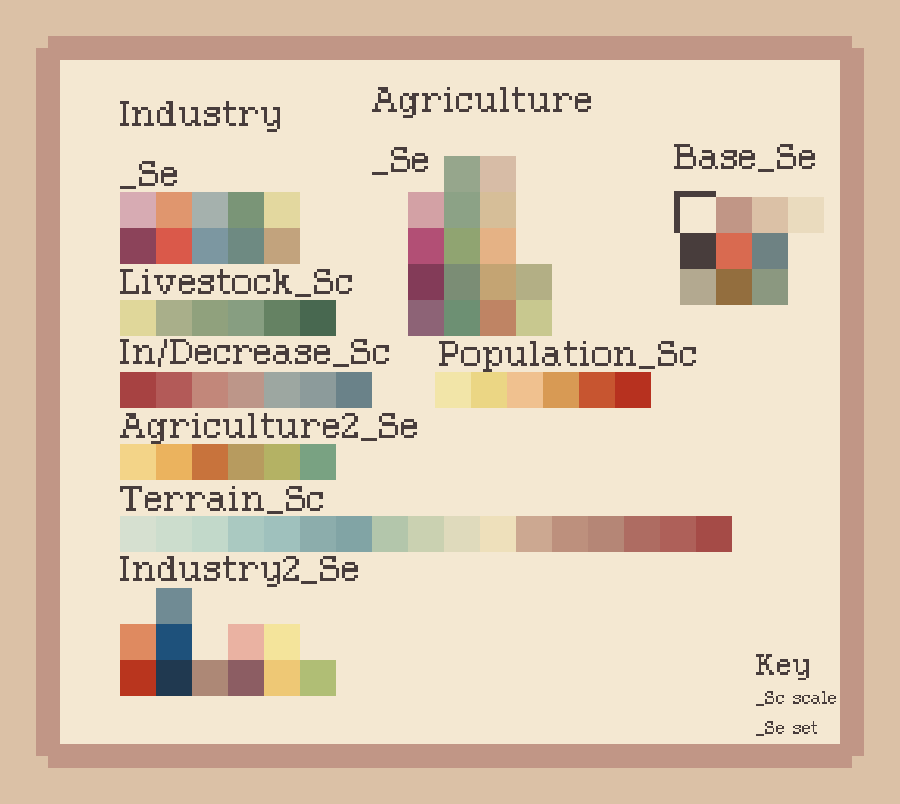
<style>
.page{position:relative;width:900px;height:804px;background:#f4e8d2}
.page>*{position:absolute;margin:0}
.t1{font:50px "Pixolde";color:#483d3c}
.t2{font:41.7px "Pixolde";color:#483d3c}
.t3{font:25px "Pixolde";color:#483d3c}
</style>
<div class="page">
<p class="t1" style="left:372px;top:87px;width:219px;height:88px">Agriculture<br>_Se</p>
<p class="t1" style="left:120px;top:101px;width:160px;height:88px">Industry<br>_Se</p>
<p class="t1" style="left:674px;top:144px;width:141px;height:28px">Base_Se</p>
<p class="t1" style="left:120px;top:269px;width:232px;height:28px">Livestock_Sc</p>
<p class="t1" style="left:120px;top:339px;width:269px;height:28px">In/Decrease_Sc</p>
<p class="t1" style="left:439px;top:341px;width:257px;height:31px">Population_Sc</p>
<p class="t1" style="left:120px;top:413px;width:297px;height:31px">Agriculture2_Se</p>
<p class="t1" style="left:120px;top:486px;width:203px;height:28px">Terrain_Sc</p>
<p class="t1" style="left:120px;top:556px;width:238px;height:31px">Industry2_Se</p>
<p class="t2" style="left:756px;top:654px;width:53px;height:26px">Key</p>
<p class="t3" style="left:756px;top:691px;width:80px;height:45px">_Sc scale<br>_Se set</p>
</div>
